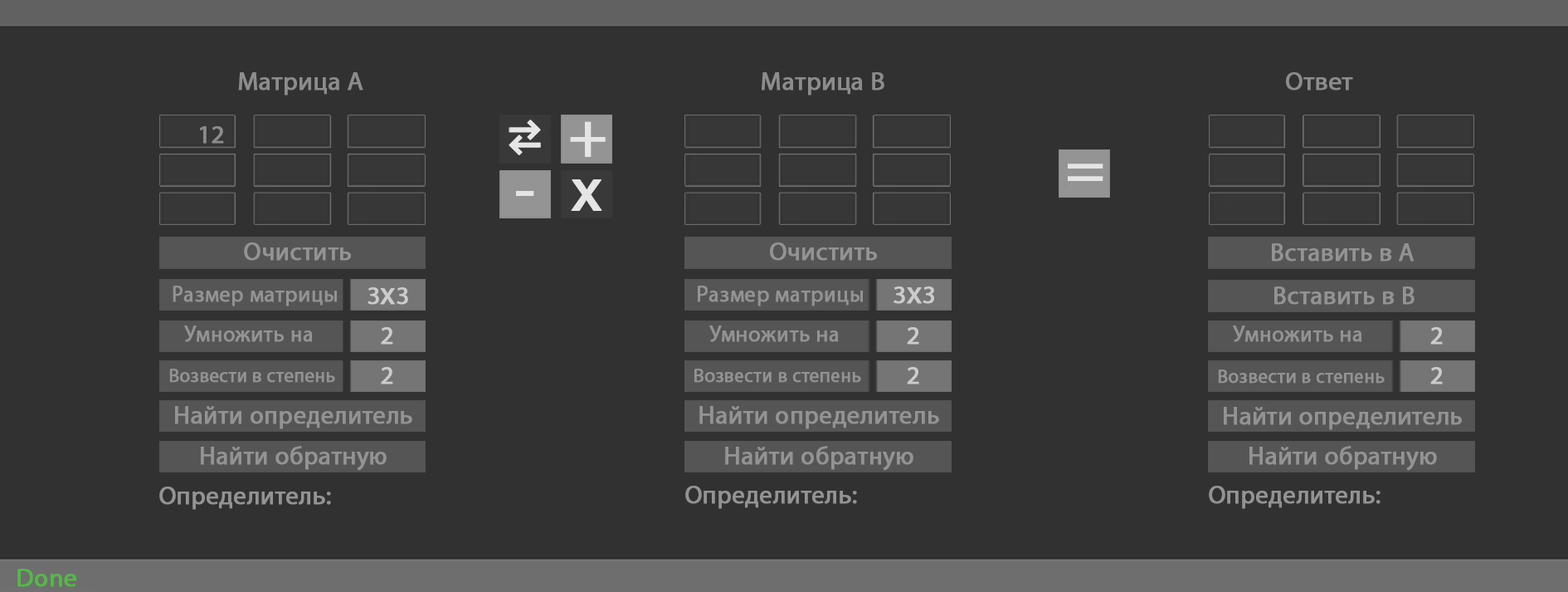
<style>
.page{position:relative;width:1568px;height:592px;background:#313131}
.page>*{position:absolute;margin:0}
.t1{font:25.7px "MyriadPro-Regular";color:#8c8c8c;font-weight:bold}
.t2{font:64.2px "MyriadPro-Regular";color:#e5e5e5;font-weight:bold}
.t3{font:25.7px "MyriadPro-Regular";color:#939393;font-weight:bold}
.t4{font:22.5px "MyriadPro-Regular";color:#939393;font-weight:bold}
.t5{font:25.7px "MyriadPro-Regular";color:#cccccc;font-weight:bold}
.t6{font:32.1px "MyriadPro-Regular";color:#cccccc;font-weight:bold}
.t7{font:19.3px "MyriadPro-Regular";color:#939393;font-weight:bold}
.t8{font:25.7px "MyriadPro-Regular";color:#54ba46;font-weight:bold}
</style>
<div class="page">
<p class="t1" style="left:238px;top:72px;width:125px;height:23px">Матрица А</p>
<p class="t1" style="left:762px;top:72px;width:122px;height:23px">Матрица В</p>
<p class="t1" style="left:1286px;top:72px;width:67px;height:18px">Ответ</p>
<p class="t2" style="left:570px;top:121px;width:36px;height:36px">+</p>
<p class="t1" style="left:200px;top:126px;width:24px;height:18px">12</p>
<p class="t2" style="left:1068px;top:163px;width:35px;height:18px">=</p>
<p class="t2" style="left:571px;top:179px;width:31px;height:32px">х</p>
<p class="t2" style="left:516px;top:191px;width:18px;height:5px">-</p>
<p class="t3" style="left:244px;top:242px;width:107px;height:19px">Очистить</p>
<p class="t3" style="left:770px;top:242px;width:107px;height:19px">Очистить</p>
<p class="t3" style="left:1272px;top:243px;width:143px;height:18px">Вставить в А</p>
<p class="t4" style="left:173px;top:285px;width:164px;height:21px">Размер матрицы</p>
<p class="t5" style="left:368px;top:287px;width:40px;height:17px">3<span class="t6">х</span>3</p>
<p class="t4" style="left:698px;top:285px;width:165px;height:21px">Размер матрицы</p>
<p class="t5" style="left:894px;top:286px;width:40px;height:18px">3<span class="t6">х</span>3</p>
<p class="t3" style="left:1274px;top:286px;width:141px;height:18px">Вставить в В</p>
<p class="t4" style="left:184px;top:325px;width:129px;height:17px">Умножить на</p>
<p class="t5" style="left:381px;top:327px;width:12px;height:17px">2</p>
<p class="t4" style="left:709px;top:325px;width:130px;height:17px">Умножить на</p>
<p class="t5" style="left:907px;top:327px;width:12px;height:17px">2</p>
<p class="t4" style="left:1233px;top:325px;width:129px;height:17px">Умножить на</p>
<p class="t5" style="left:1430px;top:327px;width:13px;height:17px">2</p>
<p class="t7" style="left:169px;top:368px;width:166px;height:14px">Возвести в степень</p>
<p class="t5" style="left:381px;top:367px;width:12px;height:17px">2</p>
<p class="t7" style="left:694px;top:368px;width:167px;height:14px">Возвести в степень</p>
<p class="t5" style="left:907px;top:367px;width:12px;height:17px">2</p>
<p class="t7" style="left:1218px;top:369px;width:167px;height:14px">Возвести в степень</p>
<p class="t5" style="left:1430px;top:367px;width:13px;height:17px">2</p>
<p class="t3" style="left:175px;top:406px;width:237px;height:23px">Найти определитель</p>
<p class="t3" style="left:699px;top:406px;width:240px;height:23px">Найти определитель</p>
<p class="t3" style="left:1224px;top:407px;width:238px;height:23px">Найти определитель</p>
<p class="t3" style="left:201px;top:446px;width:186px;height:24px">Найти обратную</p>
<p class="t3" style="left:725px;top:446px;width:188px;height:24px">Найти обратную</p>
<p class="t3" style="left:1249px;top:446px;width:188px;height:24px">Найти обратную</p>
<p class="t3" style="left:685px;top:485px;width:172px;height:24px">Oпределитель:</p>
<p class="t3" style="left:1209px;top:485px;width:172px;height:24px">Oпределитель:</p>
<p class="t3" style="left:159px;top:486px;width:172px;height:23px">Oпределитель:</p>
<p class="t8" style="left:17px;top:568px;width:59px;height:19px">Done</p>
</div>
